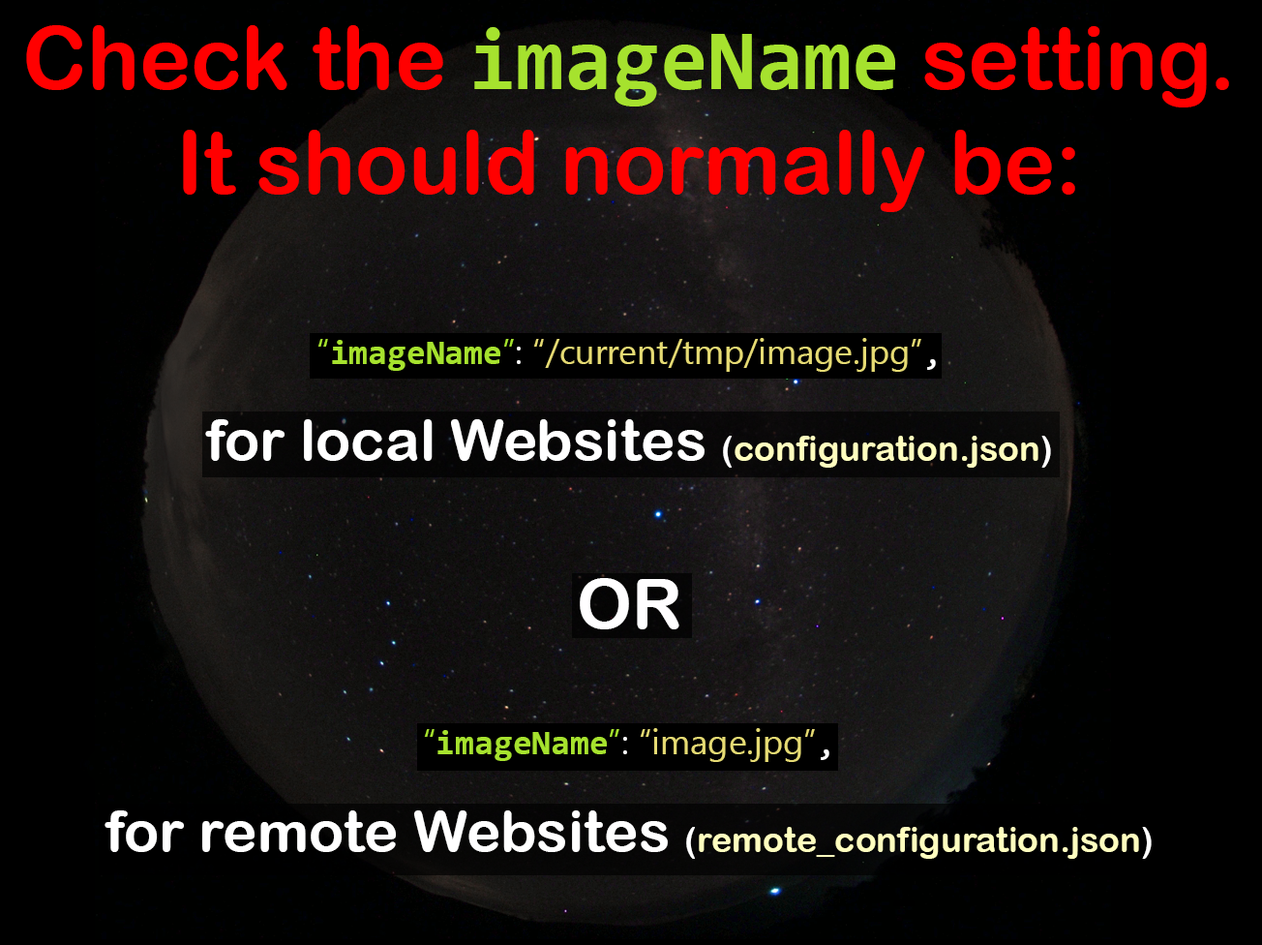
<style>
.page{position:relative;width:1262px;height:945px;background:#000000}
.page>*{position:absolute;margin:0}
.t1{font:87.1px "ArialRoundedMTBold";color:#ff0000}
.t2{font:87.1px "Consolas-Bold";color:#a6e22e}
.t3{font:34.8px "ArialRoundedMTBold";color:#fffebf}
.t4{font:34.8px "SegoeUI";color:#a6e22e}
.t5{font:34.8px "Consolas-Bold";color:#a6e22e}
.t6{font:34.8px "SegoeUIEmoji";color:#a6e22e}
.t7{font:34.8px "SegoeUIEmoji";color:#ffffff}
.t8{font:34.8px "SegoeUIEmoji";color:#e6db74}
.t9{font:34.8px "Consolas";color:#ffffff}
.t10{font:58.1px "ArialRoundedMTBold";color:#ffffff}
.t11{font:34.8px "ArialRoundedMTBold";color:#ffffff}
.t12{font:69.7px "ArialRoundedMTBold";color:#fffeff}
</style>
<div class="page">
<p class="t1" style="left:26px;top:25px;width:1203px;height:187px;text-align:center">Check the <span class="t2">imageName </span>setting.<br>It should normally be:</p>
<p class="t3" style="left:105px;top:338px;width:1047px;height:521px;text-align:center"><span class="t4">“</span><span class="t5">imageName</span><span class="t6">”</span><span class="t7">: </span><span class="t8">“/current/tmp/image.jpg”</span><span class="t9">,<br><br></span><span class="t10">for local Websites </span><span class="t11">(</span>configuration.json<span class="t11">)<br><br></span><span class="t12">OR<br><br></span><span class="t4">“</span><span class="t5">imageName</span><span class="t6">”</span><span class="t7">: </span><span class="t8">“image.jpg”</span><span class="t9">,<br><br></span><span class="t10">for remote Websites </span><span class="t11">(</span>remote_configuration.json<span class="t11">)</span></p>
</div>
